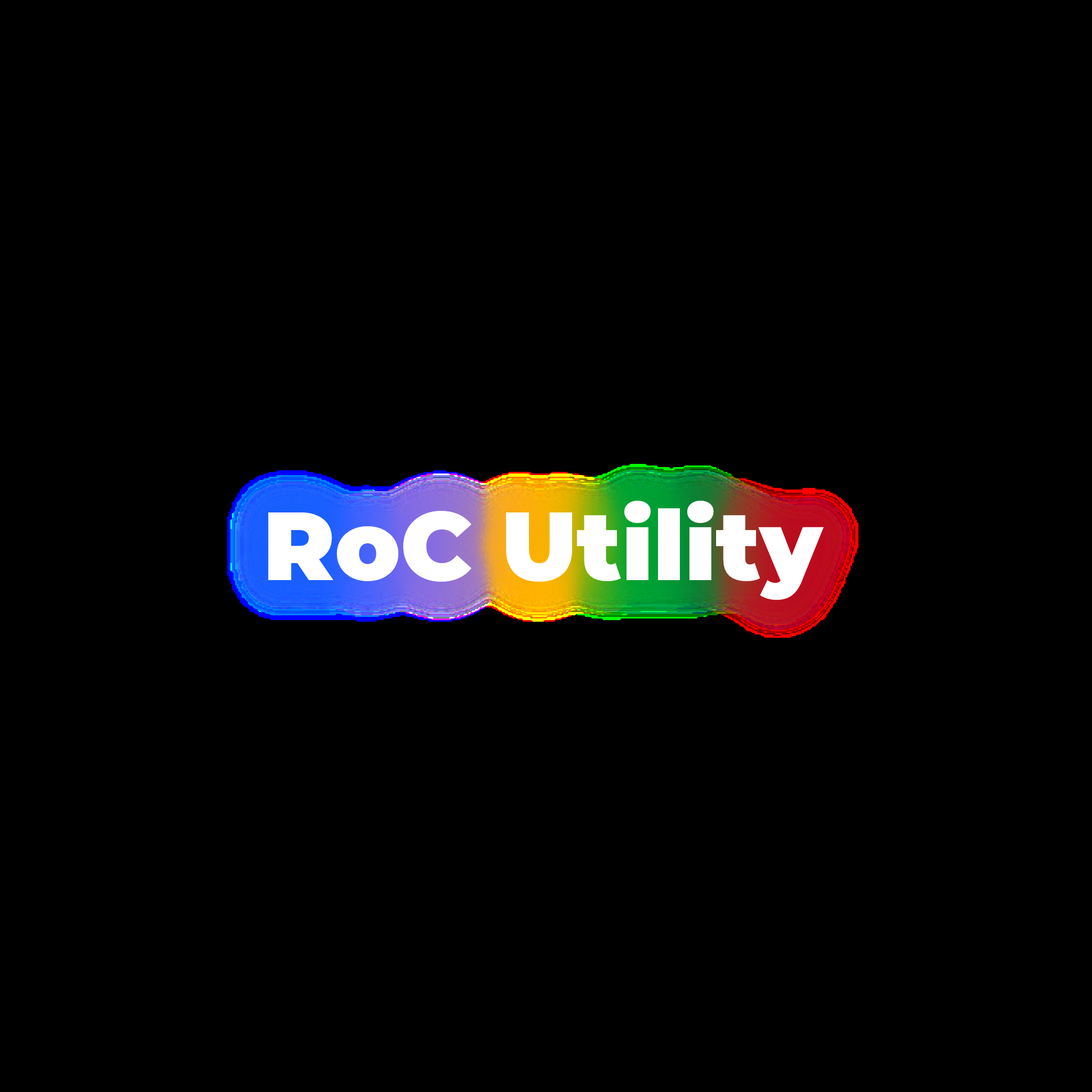
<style>
.page{position:relative;width:1092px;height:1092px;background:#000000}
.page>*{position:absolute;margin:0}
.t1{font:96.7px "Montserrat-Black";color:#ffffff}
</style>
<div class="page">
<p class="t1" style="left:0px;top:0px;width:1092px;height:1092px;text-align:center">RoC Utility</p>
</div>
